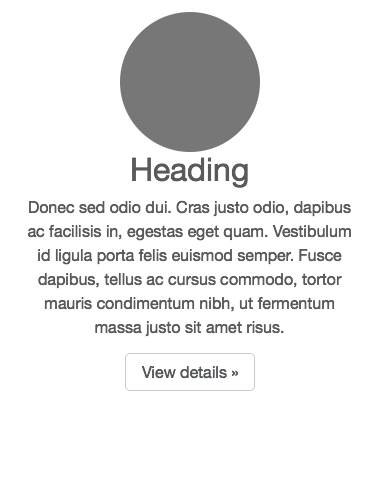
<style>
.page{position:relative;width:380px;height:482px;background:#ffffff}
.page>*{position:absolute;margin:0}
.t1{font:12px "MyriadPro-Regular";color:#5a5a5a}
.t2{font:32px/35.2px "HelveticaNeue";color:#5a5a5a}
.t3{font:12px "MyriadPro-Regular";color:#55595c}
</style>
<div class="page">
<p class="t1" style="left:28px;top:157px;width:323px;height:180px;text-align:center"><span class="t2">Heading<br></span>Donec sed odio dui. Cras justo odio, dapibus ac facilisis in, egestas eget quam. Vestibulum id ligula porta felis euismod semper. Fusce dapibus, tellus ac cursus commodo, tortor mauris condimentum nibh, ut fermentum massa justo sit amet risus.</p>
<p class="t3" style="left:141px;top:366px;width:98px;height:13px">View details »</p>
</div>
